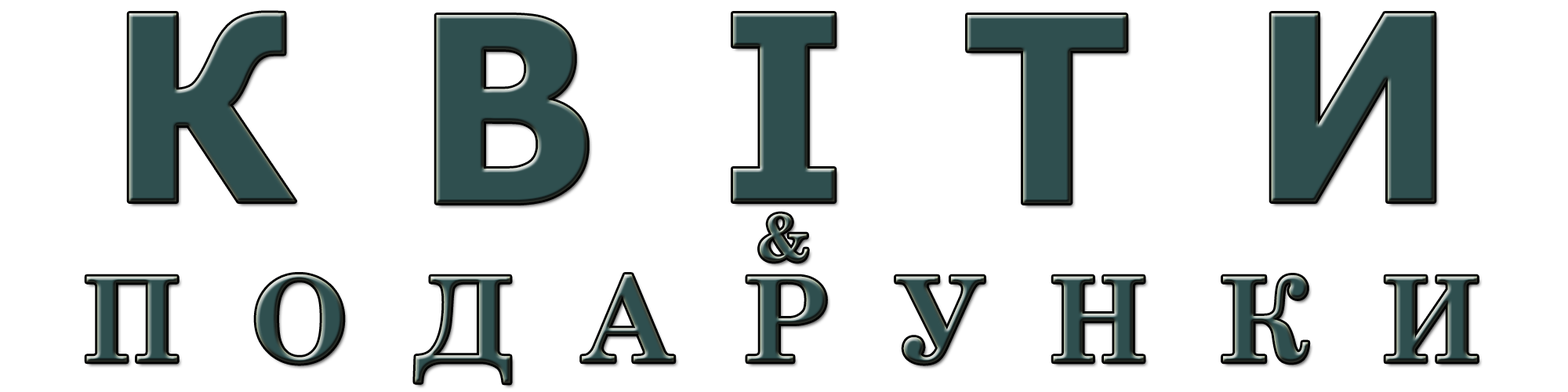
<style>
.page{position:relative;width:1568px;height:392px;background:#ffffff}
.page>*{position:absolute;margin:0}
.t1{font:258.7px "Tahoma-Bold";color:#2f4f4f}
.t2{font:117.6px "CenturySchoolbook-Bold"}
</style>
<div class="page">
<p class="t1" style="left:129px;top:13px;width:167px;height:188px">К</p>
<p class="t1" style="left:436px;top:15px;width:151px;height:188px">В</p>
<p class="t1" style="left:733px;top:13px;width:102px;height:188px">І</p>
<p class="t1" style="left:967px;top:15px;width:160px;height:188px">Т</p>
<p class="t1" style="left:1271px;top:13px;width:164px;height:188px">И</p>
<p class="t2" style="left:86px;top:274px;width:1391px;height:109px">П  О  Д  А  Р  У  Н  К  И</p>
</div>
